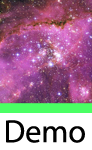
<style>
.page{position:relative;width:92px;height:150px}
.page>*{position:absolute;margin:0}
.t1{font:32.3px "MyriadPro-Regular";color:#000000}
</style>
<div class="page">
<p class="t1" style="left:6px;top:120px;width:79px;height:23px">Demo</p>
</div>
